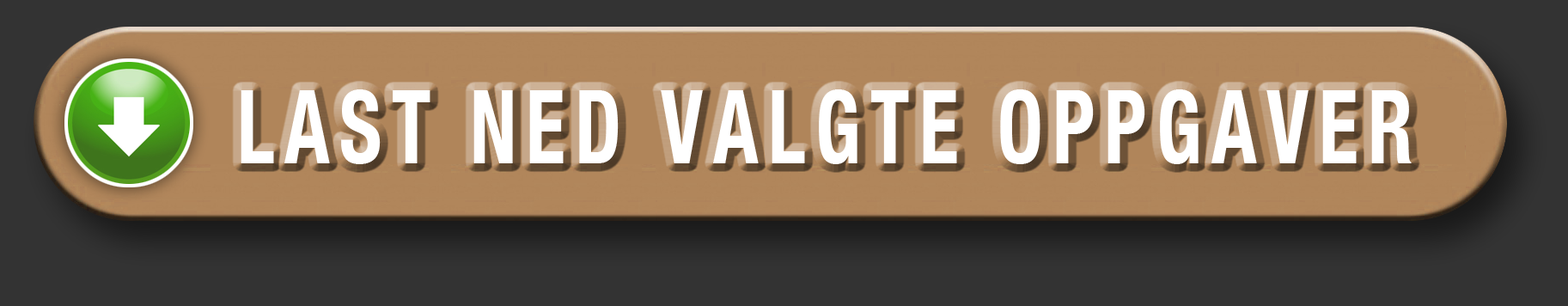
<style>
.page{position:relative;width:1568px;height:306px;background:#333333}
.page>*{position:absolute;margin:0}
.t1{font:101.8px "HelveticaNeue-CondensedBold";letter-spacing:0.12em;color:#ffffff;scale:0.8 1}
</style>
<div class="page">
<p class="t1" style="left:241px;top:89px;width:1171px;height:75px">LAST NED VALGTE OPPGAVER</p>
</div>
